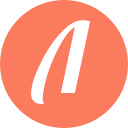
<style>
.page{position:relative;width:128px;height:128px;background:#fa7b5e}
.page>*{position:absolute;margin:0}
.t1{font:97px "Lobster";letter-spacing:0.025em;color:#ffffff}
</style>
<div class="page">
<p class="t1" style="left:31px;top:20px;width:59px;height:84px">Л</p>
</div>
